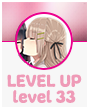
<style>
.page{position:relative;width:89px;height:110px;background:#f7f7f7}
.page>*{position:absolute;margin:0}
.t1{font:18px "Freude-Normal";color:#ef9ab7}
</style>
<div class="page">
<p class="t1" style="left:7px;top:74px;width:75px;height:13px">LEVEL UP</p>
<p class="t1" style="left:13px;top:90px;width:63px;height:13px">level 33</p>
</div>
